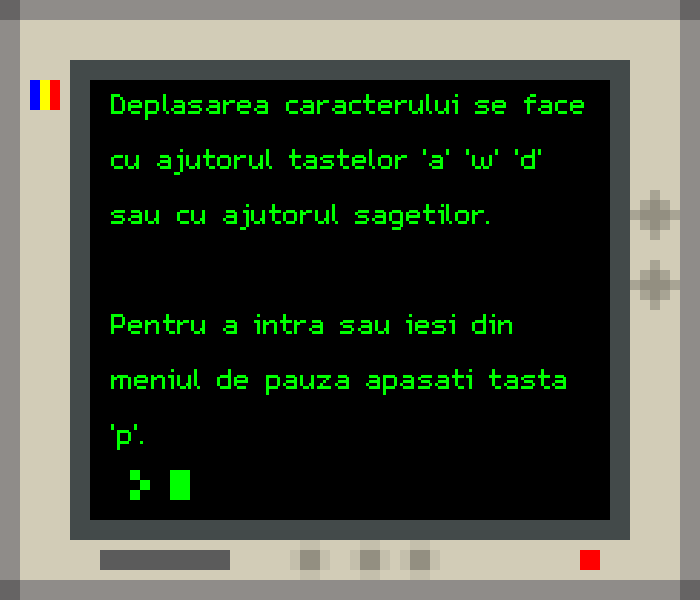
<style>
.page{position:relative;width:700px;height:600px;background:#000000}
.page>*{position:absolute;margin:0}
.t1{font:46.3px "m5x7";color:#00ff00}
</style>
<div class="page">
<p class="t1" style="left:111px;top:94px;width:473px;height:356px">Deplasarea caracterului se face cu ajutorul tastelor 'a' 'w' 'd' sau cu ajutorul sagetilor.<br><br>Pentru a intra sau iesi din meniul de pauza apasati tasta 'p'.</p>
</div>
